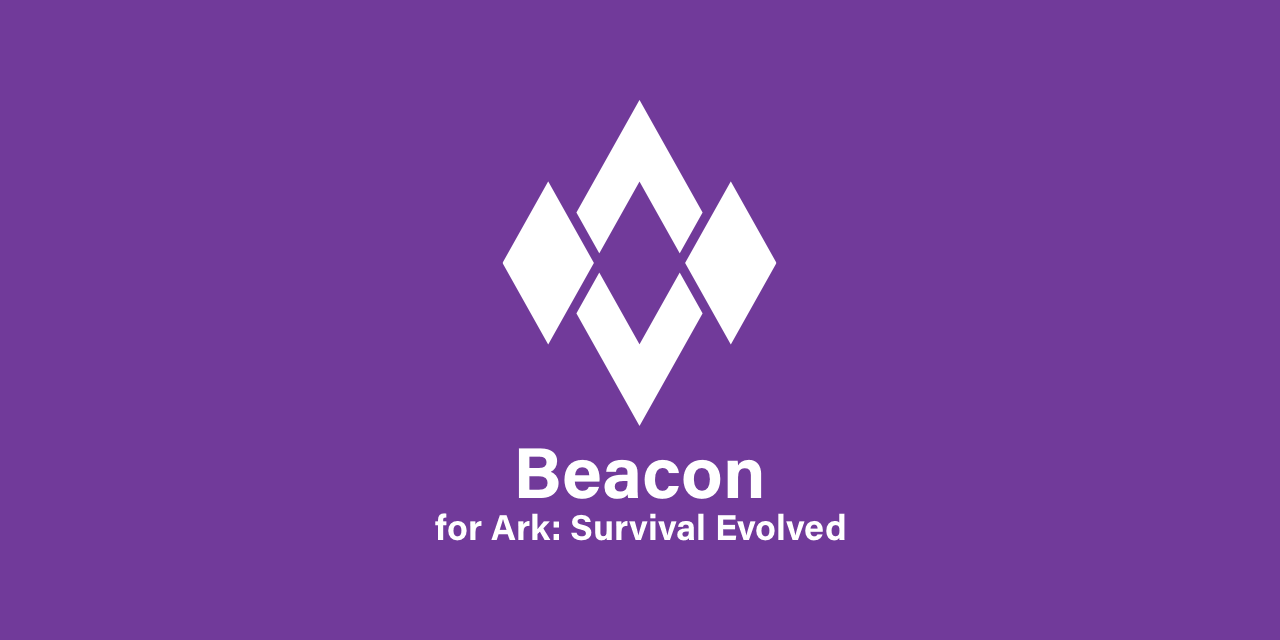
<style>
.page{position:relative;width:1280px;height:640px;background:#713a9a}
.page>*{position:absolute;margin:0}
.t1{font:72px "AcuminPro-Bold";color:#ffffff}
.t2{font:36px "AcuminPro-Bold";color:#ffffff}
</style>
<div class="page">
<p class="t1" style="left:518px;top:448px;width:244px;height:51px">Beacon</p>
<p class="t2" style="left:435px;top:513px;width:410px;height:28px">for Ark: Survival Evolved</p>
</div>
